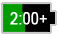
<style>
.page{position:relative;width:58px;height:36px;background:#000000}
.page>*{position:absolute;margin:0}
.t1{font:15.6px "ArialMT";color:#ffffff;font-weight:bold;scale:0.9 1}
</style>
<div class="page">
<p class="t1" style="left:10px;top:12px;width:37px;height:13px">2:00+</p>
</div>
